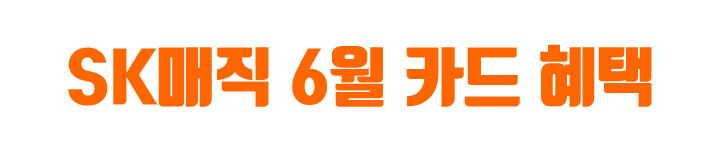
<style>
.page{position:relative;width:720px;height:157px;background:#ffffff}
.page>*{position:absolute;margin:0}
.t1{font:64.7px "TmonMonsoriOTFBlack";color:#ff6600}
</style>
<div class="page">
<p class="t1" style="left:68px;top:44px;width:584px;height:63px">SK매직 6월 카드 혜택</p>
</div>
